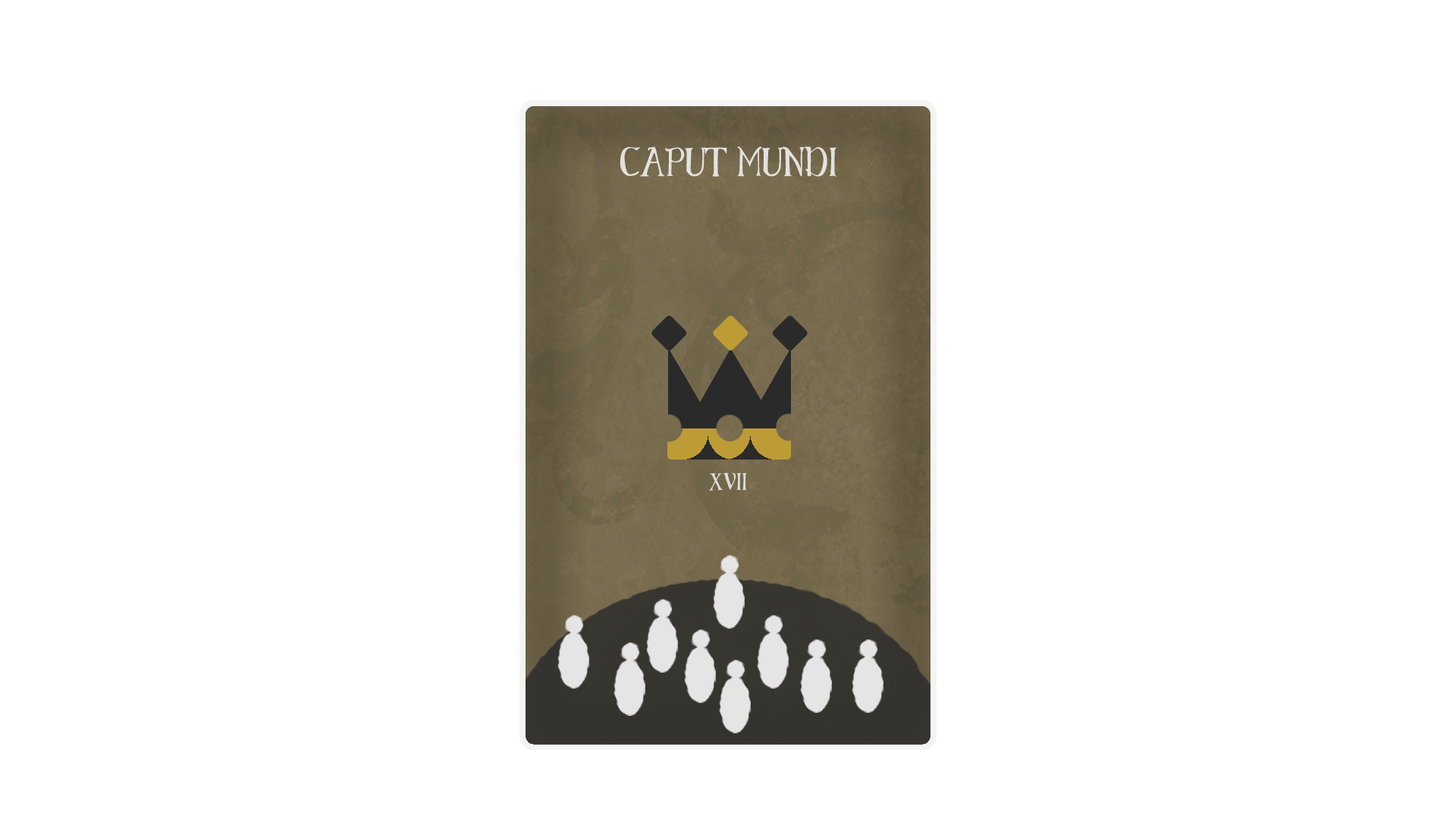
<style>
.page{position:relative;width:1456px;height:819px;background:#ffffff}
.page>*{position:absolute;margin:0}
.t1{font:20.5px "ElementaryGothicBookhand-Regular";color:#e3e2df}
.t2{font:12.1px "ElementaryGothicBookhand-Regular";color:#dedede}
</style>
<div class="page">
<p class="t1" style="left:620px;top:146px;width:217px;height:31px">CAPUT MUNDI</p>
<p class="t2" style="left:708px;top:472px;width:39px;height:19px">XVII</p>
</div>
